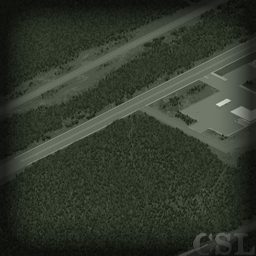
<style>
.page{position:relative;width:256px;height:256px}
.page>*{position:absolute;margin:0}
.t1{font:28.4px "AtticAntique";color:#383936;font-variant:small-caps;font-weight:bold}
</style>
<div class="page">
<p class="t1" style="left:193px;top:232px;width:62px;height:24px">CSL</p>
</div>
